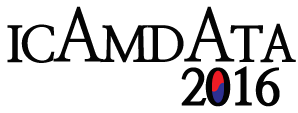
<style>
.page{position:relative;width:298px;height:113px;background:#ffffff}
.page>*{position:absolute;margin:0}
.t1{font:50px "NanumMyeongjoExtraBold";letter-spacing:-0.07em;color:#040404}
.t2{font:72px "NanumMyeongjoBold";letter-spacing:-0.07em;color:#040404}
.t3{font:50px "NanumMyeongjoExtraBold";letter-spacing:-0.07em;color:#030303;font-weight:bold}
</style>
<div class="page">
<p class="t1" style="left:7px;top:6px;width:289px;height:57px">IC<span class="t2">A</span>MD<span class="t2">A</span>TA</p>
<p class="t3" style="left:181px;top:66px;width:99px;height:41px">2016</p>
</div>
